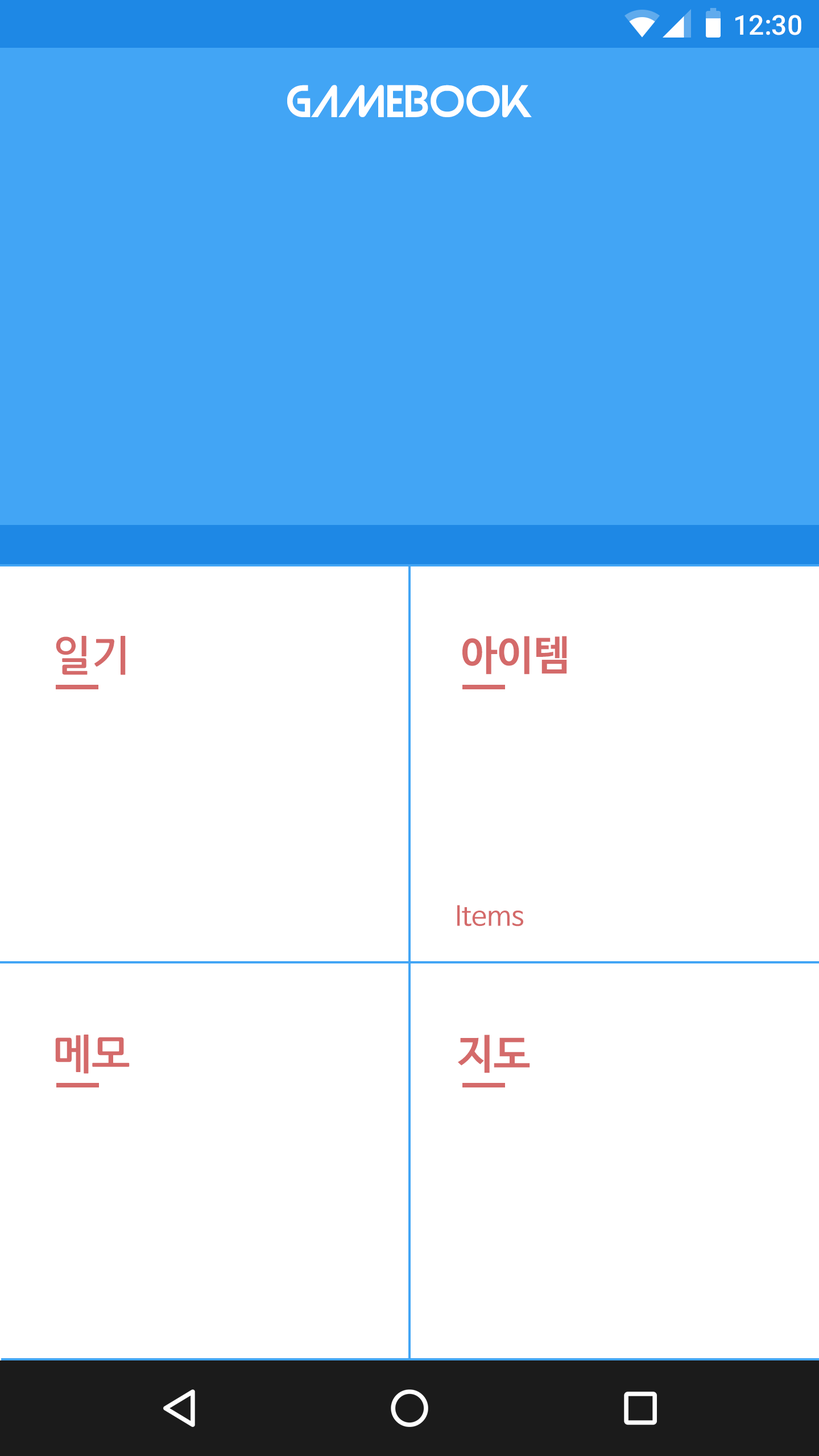
<style>
.page{position:relative;width:819px;height:1456px;background:#ffffff}
.page>*{position:absolute;margin:0}
.t1{font:27.3px "Roboto-Medium";color:#ffffff}
.t2{font:40.9px "Strasua-Regular";color:#ffffff}
.t3{font:40.9px "NanumGothicBold";color:#d46a6a}
.t4{font:40.9px "NanumBarunGothicBold";color:#d46a6a}
.t5{font:27.3px "NanumBarunGothic";color:#d46a6a}
</style>
<div class="page">
<p class="t1" style="left:735px;top:15px;width:66px;height:20px">12:30</p>
<p class="t2" style="left:287px;top:85px;width:245px;height:33px">GaMEBook</p>
<p class="t3" style="left:56px;top:636px;width:70px;height:39px">일기</p>
<p class="t4" style="left:462px;top:636px;width:105px;height:39px">아이템</p>
<p class="t5" style="left:457px;top:905px;width:66px;height:21px">Items</p>
<p class="t3" style="left:55px;top:1035px;width:75px;height:39px">메모</p>
<p class="t4" style="left:458px;top:1035px;width:72px;height:38px">지도</p>
</div>
